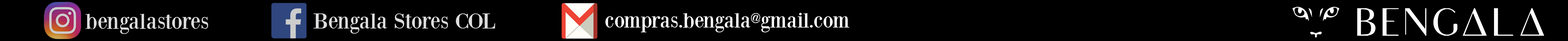
<style>
.page{position:relative;width:1568px;height:41px;background:#000000}
.page>*{position:absolute;margin:0}
.t1{font:22.5px "BodoniXT";color:#dddddd}
.t2{font:21.4px "BodoniXT";color:#ffffff}
</style>
<div class="page">
<p class="t1" style="left:86px;top:14px;width:122px;height:20px">bengalastores</p>
<p class="t1" style="left:314px;top:13px;width:181px;height:21px">Bengala Stores COL</p>
<p class="t2" style="left:605px;top:13px;width:244px;height:19px">compras.bengala@gmail.com</p>
</div>
